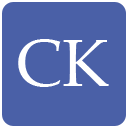
<style>
.page{position:relative;width:128px;height:128px;background:#4a60a7}
.page>*{position:absolute;margin:0}
.t1{font:65px "Palatino-Roman";color:#ffffff}
</style>
<div class="page">
<p class="t1" style="left:18px;top:39px;width:91px;height:48px">CK</p>
</div>
